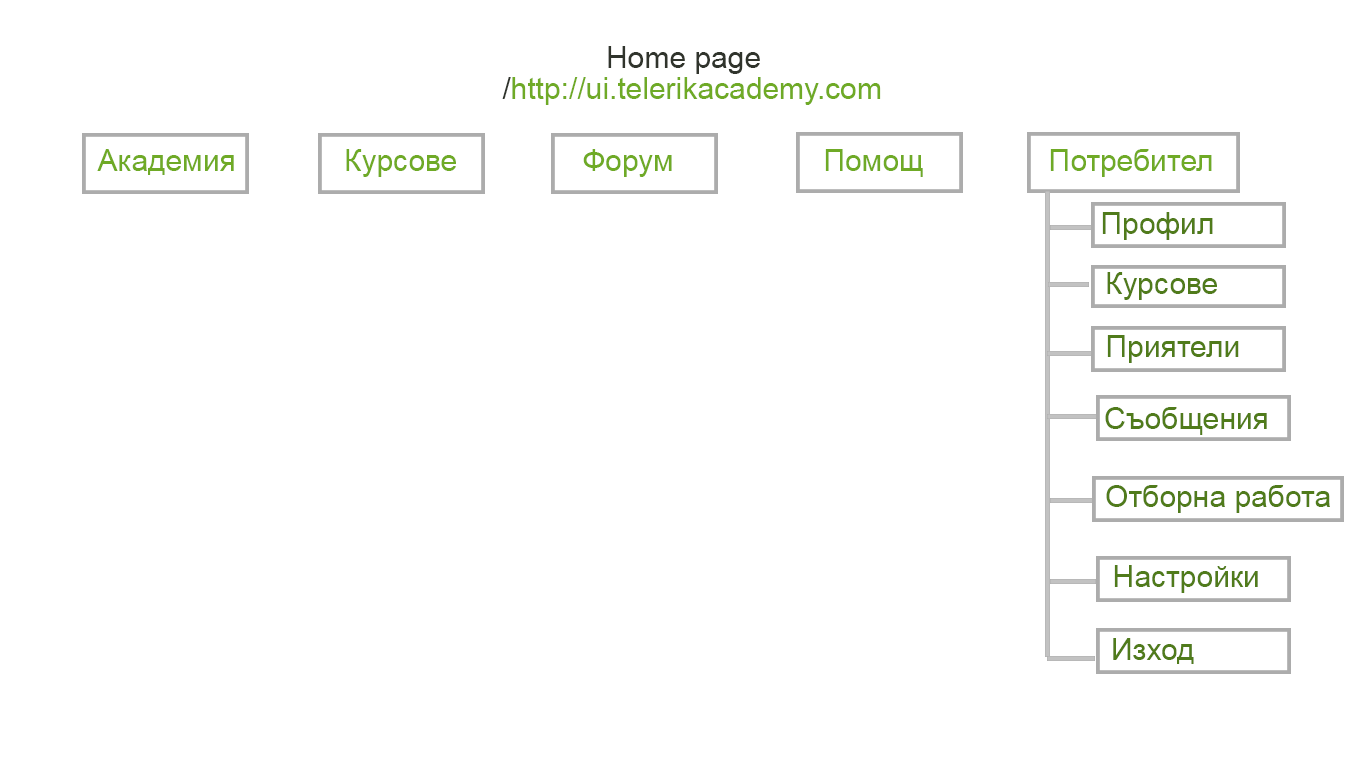
<style>
.page{position:relative;width:1366px;height:768px;background:#ffffff}
.page>*{position:absolute;margin:0}
.t1{font:30px "ArialMT";color:#30342c}
.t2{font:30px "ArialMT";color:#6faa26}
.t3{font:30px "ArialMT";color:#507b1b}
</style>
<div class="page">
<p class="t1" style="left:608px;top:46px;width:152px;height:28px">Home page</p>
<p class="t2" style="left:502px;top:77px;width:379px;height:28px">http://ui.telerikacademy.com<span class="t1">/</span></p>
<p class="t2" style="left:97px;top:149px;width:1115px;height:28px">Академия             Курсове               Форум                  Помощ               Потребител</p>
<p class="t3" style="left:1102px;top:212px;width:111px;height:28px">Профил</p>
<p class="t3" style="left:1107px;top:272px;width:110px;height:28px">Курсове</p>
<p class="t3" style="left:1107px;top:335px;width:132px;height:28px">Приятели</p>
<p class="t3" style="left:1105px;top:407px;width:162px;height:28px">Съобщения</p>
<p class="t3" style="left:1106px;top:485px;width:224px;height:28px">Отборна работа</p>
<p class="t3" style="left:1114px;top:565px;width:144px;height:28px">Настройки</p>
<p class="t3" style="left:1113px;top:638px;width:81px;height:26px">Изход</p>
</div>
